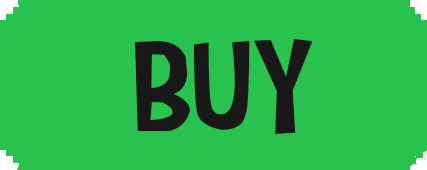
<style>
.page{position:relative;width:427px;height:170px;background:#29c24f}
.page>*{position:absolute;margin:0}
.t1{font:167.6px "CartonsixNC";color:#171817}
</style>
<div class="page">
<p class="t1" style="left:135px;top:39px;width:178px;height:95px">Buy</p>
</div>
